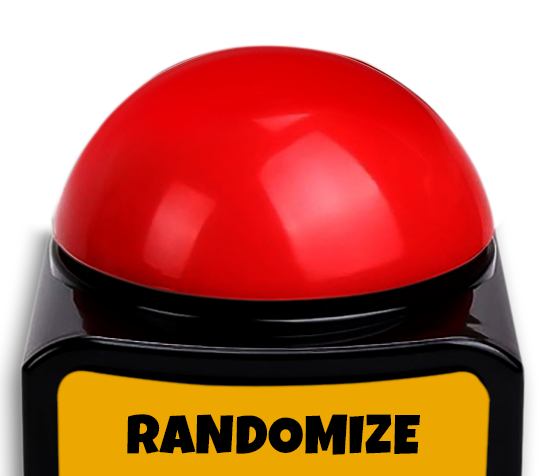
<style>
.page{position:relative;width:546px;height:476px;background:#ffffff}
.page>*{position:absolute;margin:0}
.t1{font:55.6px "LuckiestGuy-Regular";letter-spacing:0.01em;color:#000000}
</style>
<div class="page">
<p class="t1" style="left:127px;top:414px;width:293px;height:41px">RANDOMIZE</p>
</div>
